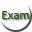
<style>
.page{position:relative;width:32px;height:32px;background:#ffffff}
.page>*{position:absolute;margin:0}
.t1{font:12px "Candara";color:#286311}
</style>
<div class="page">
<p class="t1" style="left:2px;top:11px;width:27px;height:8px">Exam</p>
</div>
